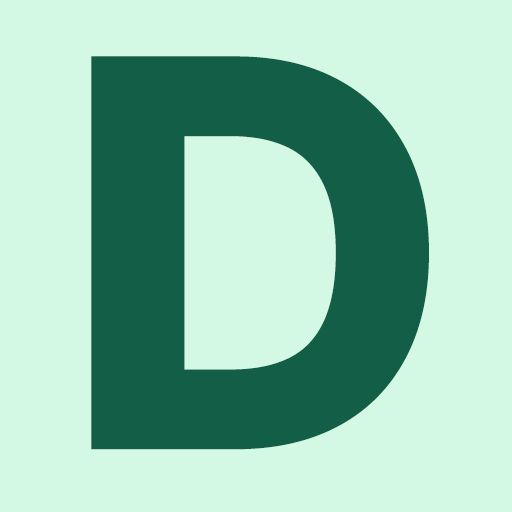
<style>
.page{position:relative;width:512px;height:512px;background:#d3f9e5}
.page>*{position:absolute;margin:0}
.t1{font:539.7px "Inter-ExtraBold";letter-spacing:0.12em;color:#135e46}
</style>
<div class="page">
<p class="t1" style="left:91px;top:56px;width:338px;height:394px">D</p>
</div>
